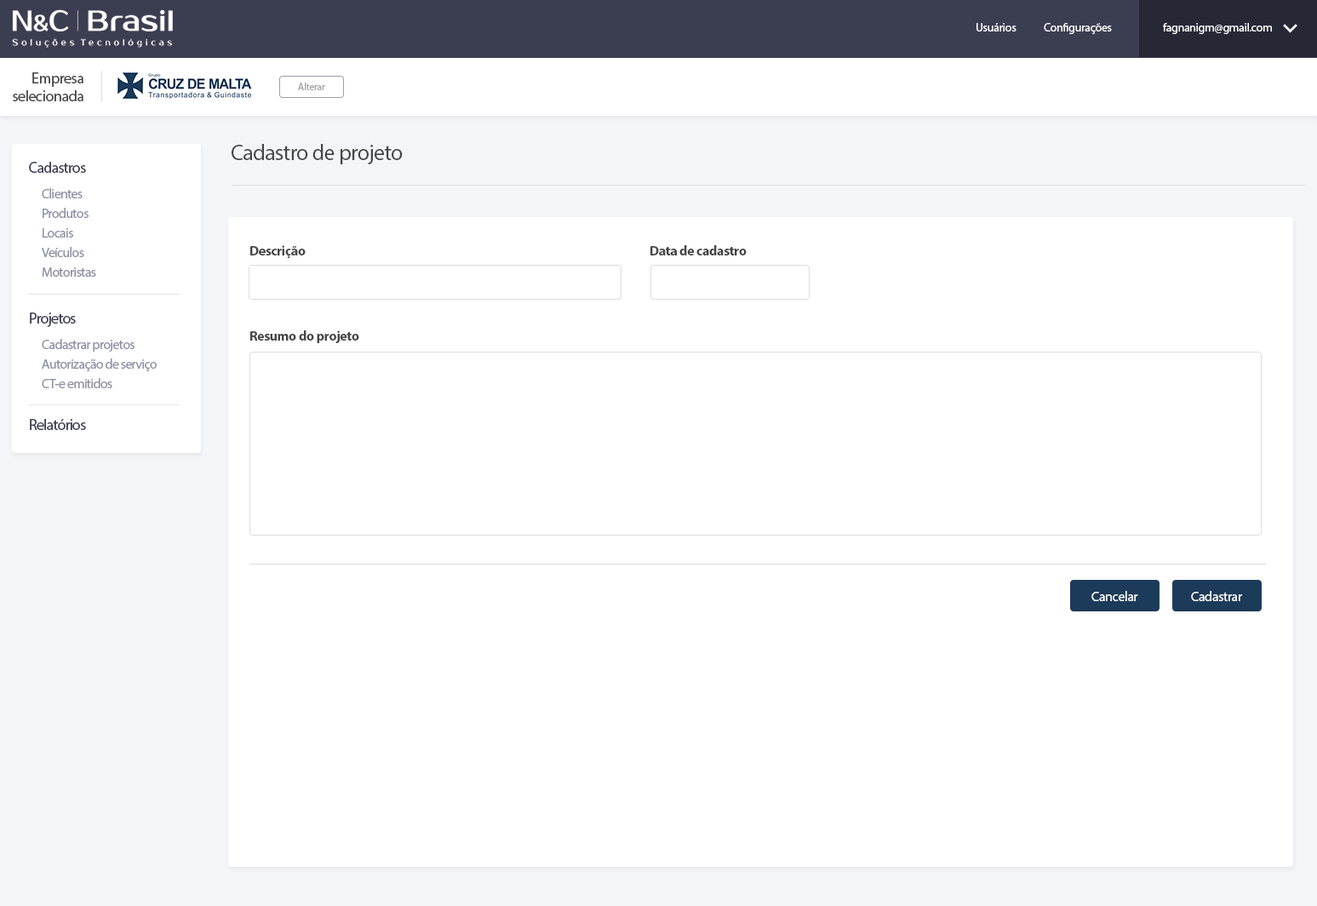
<style>
.page{position:relative;width:1317px;height:906px;background:#ffffff}
.page>*{position:absolute;margin:0}
.t1{font:11.9px "MyriadPro-Regular";letter-spacing:-0.025em;color:#ffffff}
.t2{font:15.3px/17.8px "MyriadPro-Regular";letter-spacing:-0.025em;color:#454545}
.t3{font:10.2px "MyriadPro-Regular";letter-spacing:-0.025em;color:#a2a2a2}
.t4{font:22.1px "MyriadPro-Regular";letter-spacing:-0.025em;color:#454545}
.t5{font:15.3px "MyriadPro-Regular";letter-spacing:-0.045em;color:#3b3e51}
.t6{font:13.6px "MyriadPro-Regular";letter-spacing:-0.045em;color:#8c8fa4}
.t7{font:13.6px "MyriadPro-Bold";letter-spacing:-0.025em;color:#454545}
.t8{font:13.6px "MyriadPro-Regular";letter-spacing:-0.045em;color:#8d90a5}
.t9{font:13.6px "MyriadPro-Regular";letter-spacing:-0.025em;color:#ffffff}
</style>
<div class="page">
<p class="t1" style="left:976px;top:23px;width:40px;height:8px">Usuários</p>
<p class="t1" style="left:1043px;top:23px;width:69px;height:11px">Configurações</p>
<p class="t1" style="left:1163px;top:23px;width:109px;height:11px">fagnanigm@gmail.com</p>
<p class="t2" style="left:13px;top:72px;width:70px;height:29px;text-align:right">Empresa<br>selecionada</p>
<p class="t3" style="left:298px;top:83px;width:27px;height:7px">Alterar</p>
<p class="t4" style="left:232px;top:144px;width:171px;height:20px">Cadastro de projeto</p>
<p class="t5" style="left:29px;top:162px;width:57px;height:11px">Cadastros</p>
<p class="t6" style="left:42px;top:188px;width:41px;height:10px">Clientes</p>
<p class="t6" style="left:43px;top:208px;width:46px;height:10px">Produtos</p>
<p class="t6" style="left:43px;top:228px;width:30px;height:9px">Locais</p>
<p class="t7" style="left:250px;top:245px;width:56px;height:13px">Descrição</p>
<p class="t7" style="left:650px;top:245px;width:96px;height:10px">Data de cadastro</p>
<p class="t6" style="left:42px;top:247px;width:42px;height:10px">Veículos</p>
<p class="t6" style="left:42px;top:267px;width:54px;height:10px">Motoristas</p>
<p class="t5" style="left:30px;top:312px;width:46px;height:15px">Projetos</p>
<p class="t6" style="left:42px;top:339px;width:92px;height:13px">Cadastrar projetos</p>
<p class="t7" style="left:250px;top:330px;width:109px;height:13px">Resumo do projeto</p>
<p class="t8" style="left:42px;top:358px;width:115px;height:13px">Autorização de serviço</p>
<p class="t6" style="left:42px;top:378px;width:70px;height:10px">CT-e emitidos</p>
<p class="t5" style="left:30px;top:419px;width:56px;height:11px">Relatórios</p>
<p class="t9" style="left:1091px;top:591px;width:47px;height:10px">Cancelar</p>
<p class="t9" style="left:1191px;top:591px;width:51px;height:10px">Cadastrar</p>
</div>
